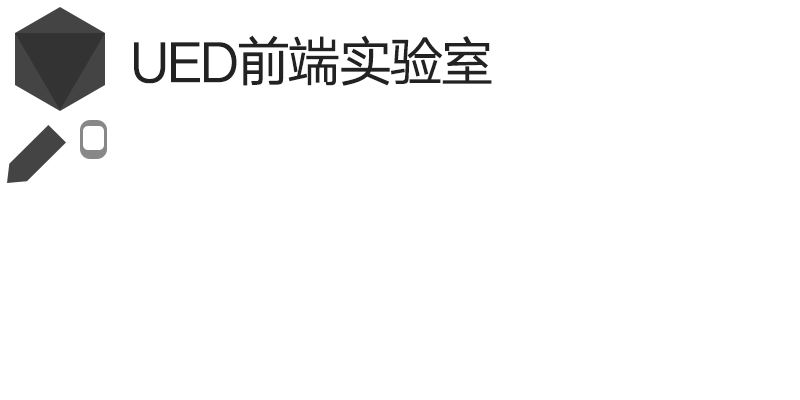
<style>
.page{position:relative;width:800px;height:400px;background:#ffffff}
.page>*{position:absolute;margin:0}
.t1{font:54px "HYQiHei-EZS";letter-spacing:-0.075em;color:#222222;font-weight:bold}
</style>
<div class="page">
<p class="t1" style="left:134px;top:35px;width:358px;height:51px">UED前端实验室</p>
</div>
